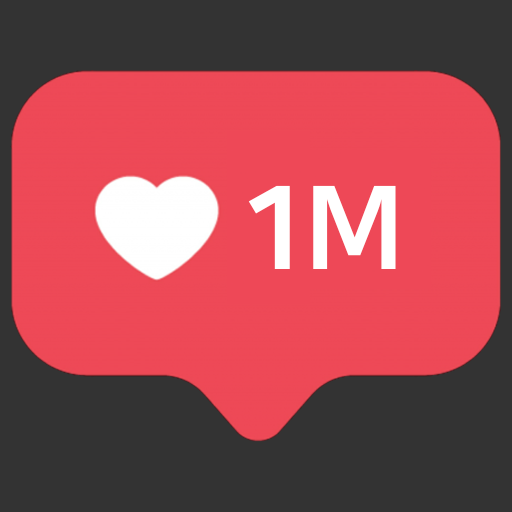
<style>
.page{position:relative;width:512px;height:512px;background:#333333}
.page>*{position:absolute;margin:0}
.t1{font:115.1px "NanumSquareEB";letter-spacing:-0.025em;color:#ffffff}
</style>
<div class="page">
<p class="t1" style="left:248px;top:185px;width:148px;height:84px">1M</p>
</div>
